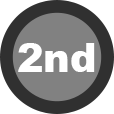
<style>
.page{position:relative;width:114px;height:114px;background:#818181}
.page>*{position:absolute;margin:0}
.t1{font:39.8px "Arial-Black";color:#ffffff}
</style>
<div class="page">
<p class="t1" style="left:18px;top:43px;width:77px;height:29px">2nd</p>
</div>
